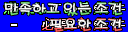
<style>
.page{position:relative;width:128px;height:32px;background:#0000ff}
.page>*{position:absolute;margin:0}
.t1{font:15px "H2porM";letter-spacing:-0.08em}
</style>
<div class="page">
<p class="t1" style="left:4px;top:1px;width:119px;height:15px">만족하고 있는 조건</p>
<p class="t1" style="left:49px;top:17px;width:73px;height:15px">필요한 조건</p>
</div>
